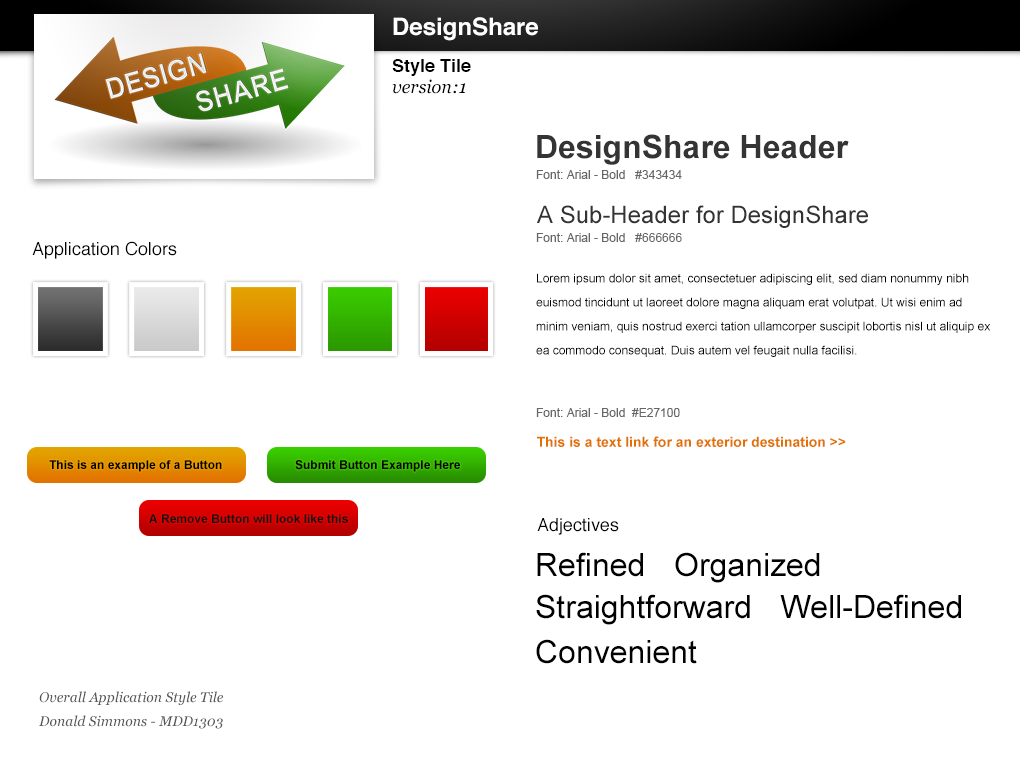
<style>
.page{position:relative;width:1020px;height:760px;background:#ffffff}
.page>*{position:absolute;margin:0}
.t1{font:24px "Helvetica-Bold";color:#ffffff}
.t2{font:18px "Helvetica-Bold";color:#000000}
.t3{font:18px "Georgia-Italic";color:#000000}
.t4{font:32px "Arial-BoldMT";color:#343434}
.t5{font:12px "ArialMT";color:#666666}
.t6{font:24px "ArialMT";color:#333333}
.t7{font:18px "Helvetica";color:#000000}
.t8{font:12px/24px "ArialMT";color:#000000}
.t9{font:14px "Arial-BoldMT";color:#e27100}
.t10{font:12px "Arial-BoldMT";color:#000000}
.t11{font:12px "Arial-BoldMT";color:#131313}
.t12{font:32px "ArialMT";color:#000000}
.t13{font:14px/24px "Georgia-Italic";color:#565656}
</style>
<div class="page">
<p class="t1" style="left:393px;top:17px;width:145px;height:24px">DesignShare</p>
<p class="t2" style="left:392px;top:59px;width:79px;height:17px">Style Tile</p>
<p class="t3" style="left:392px;top:79px;width:74px;height:15px">version:1</p>
<p class="t4" style="left:537px;top:134px;width:312px;height:31px">DesignShare Header</p>
<p class="t5" style="left:536px;top:170px;width:146px;height:9px">Font: Arial - Bold   #343434</p>
<p class="t6" style="left:537px;top:205px;width:331px;height:23px">A Sub-Header for DesignShare</p>
<p class="t5" style="left:536px;top:233px;width:146px;height:9px">Font: Arial - Bold   #666666</p>
<p class="t7" style="left:32px;top:241px;width:145px;height:18px">Application Colors</p>
<p class="t8" style="left:536px;top:273px;width:455px;height:84px">Lorem ipsum dolor sit amet, consectetuer adipiscing elit, sed diam nonummy nibh euismod tincidunt ut laoreet dolore magna aliquam erat volutpat. Ut wisi enim ad minim veniam, quis nostrud exerci tation ullamcorper suscipit lobortis nisl ut aliquip ex ea commodo consequat. Duis autem vel feugait nulla facilisi.</p>
<p class="t5" style="left:536px;top:408px;width:144px;height:9px">Font: Arial - Bold  #E27100</p>
<p class="t9" style="left:537px;top:436px;width:309px;height:11px">This is a text link for an exterior destination &gt;&gt;</p>
<p class="t10" style="left:49px;top:460px;width:173px;height:12px">This is an example of a Button</p>
<p class="t10" style="left:295px;top:460px;width:165px;height:12px">Submit Button Example Here</p>
<p class="t11" style="left:149px;top:514px;width:199px;height:9px">A Remove Button will look like this</p>
<p class="t7" style="left:537px;top:518px;width:82px;height:17px">Adjectives</p>
<p class="t12" style="left:537px;top:552px;width:106px;height:25px">Refined</p>
<p class="t12" style="left:675px;top:552px;width:145px;height:31px">Organized</p>
<p class="t12" style="left:536px;top:594px;width:214px;height:31px">Straightforward</p>
<p class="t12" style="left:780px;top:594px;width:181px;height:25px">Well-Defined</p>
<p class="t12" style="left:536px;top:639px;width:161px;height:25px">Convenient</p>
<p class="t13" style="left:39px;top:691px;width:184px;height:38px">Overall Application Style Tile<br>Donald Simmons - MDD1303</p>
</div>
